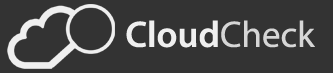
<style>
.page{position:relative;width:333px;height:73px;background:#333333}
.page>*{position:absolute;margin:0}
.t1{font:37.1px "MyriadPro-Semibold";color:#efefef}
.t2{font:37.1px "MyriadPro-Regular";color:#d6d6d6}
</style>
<div class="page">
<p class="t1" style="left:126px;top:20px;width:189px;height:28px">Cloud<span class="t2">Check</span></p>
</div>
